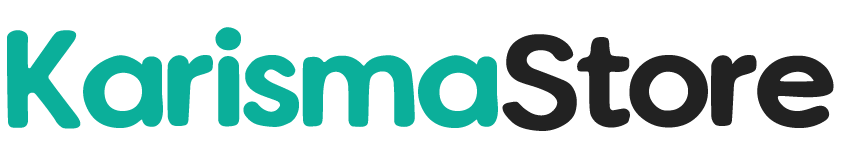
<style>
.page{position:relative;width:841px;height:150px;background:#ffffff}
.page>*{position:absolute;margin:0}
.t1{font:111.7px "VanillaExtractRegular";color:#0baf9a;scale:1.05 1}
.t2{font:111.7px "VanillaExtractRegular";color:#222222;scale:1.05 1}
</style>
<div class="page">
<p class="t1" style="left:7px;top:27px;width:827px;height:104px">Karisma<span class="t2">Store</span></p>
</div>
